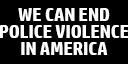
<style>
.page{position:relative;width:128px;height:64px;background:#000000}
.page>*{position:absolute;margin:0}
.t1{font:18.2px/17.4px "HPSimplified-Bold";letter-spacing:-0.01em;color:#ffffff}
</style>
<div class="page">
<p class="t1" style="left:0px;top:8px;width:129px;height:47px;text-align:center">WE CAN END<br>POLICE VIOLENCE<br>IN AMERICA</p>
</div>
